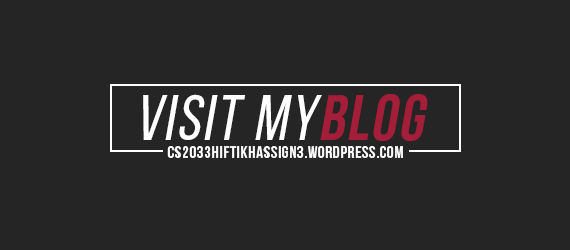
<style>
.page{position:relative;width:570px;height:250px;background:#252525}
.page>*{position:absolute;margin:0}
.t1{font:64px "BebasNeueRegular";letter-spacing:0.04em;color:#ffffff;font-style:italic}
.t2{font:64px "BebasNeueBold";letter-spacing:0.04em;color:#a41d39;font-style:italic}
.t3{font:17px "BebasNeueBold";letter-spacing:0.04em;color:#ffffff}
</style>
<div class="page">
<p class="t1" style="left:143px;top:94px;width:285px;height:47px">Visit my<span class="t2">blog</span></p>
<p class="t3" style="left:167px;top:146px;width:236px;height:12px">cs2033hiftikhassign3.wordpress.com</p>
</div>
